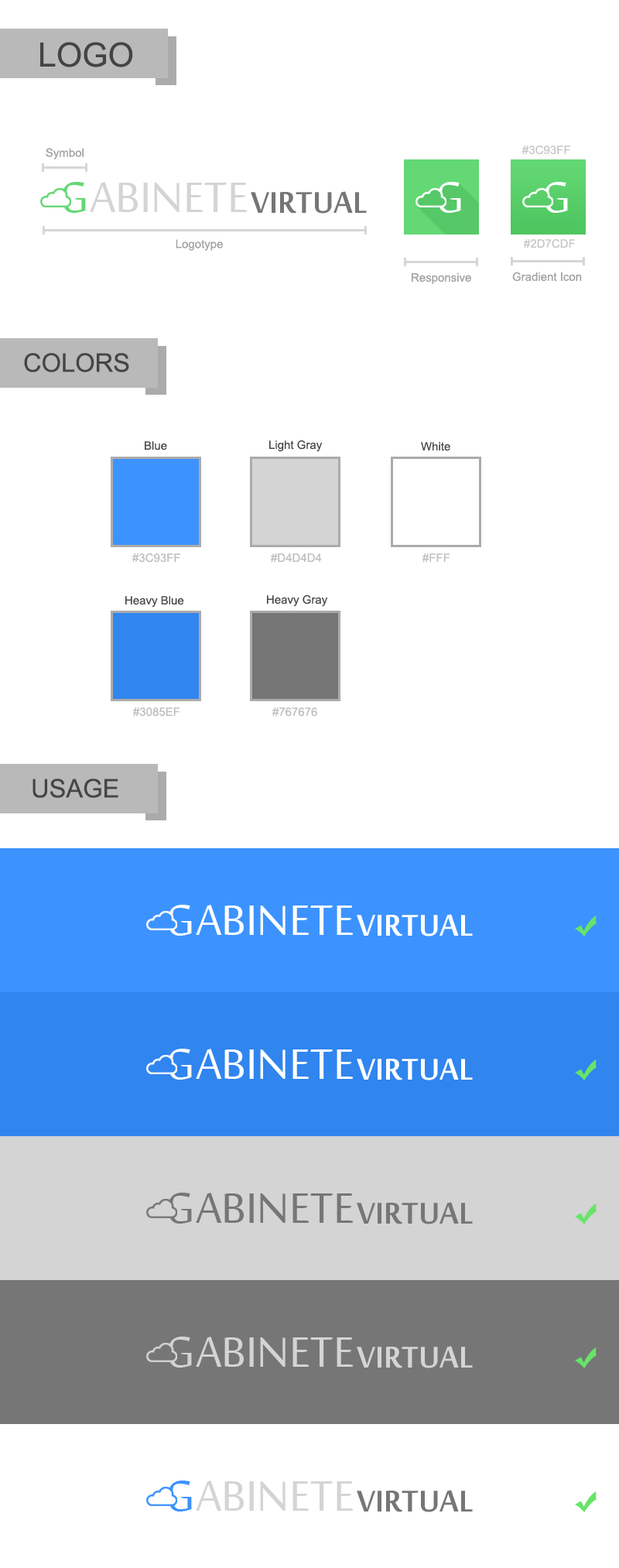
<style>
.page{position:relative;width:619px;height:1568px;background:#ffffff}
.page>*{position:absolute;margin:0}
.t1{font:33.4px "ArialMT";color:#454545}
.t2{font:11.6px "ArialMT";color:#a1a1a1}
.t3{font:11.6px "ArialMT";color:#c8c6c6}
.t4{font:46px "MoolBoran";color:#767676}
.t5{font:25.5px "ArialMT";color:#454545}
.t6{font:11.6px "ArialMT";color:#454545}
.t7{font:11.6px "ArialMT";color:#bfbdbd}
</style>
<div class="page">
<p class="t1" style="left:40px;top:42px;width:93px;height:25px">LOGO</p>
<p class="t2" style="left:46px;top:148px;width:38px;height:11px">Symbol</p>
<p class="t3" style="left:522px;top:146px;width:48px;height:9px">#3C93FF</p>
<p class="t4" style="left:251px;top:191px;width:116px;height:23px">VIRTUAL</p>
<p class="t2" style="left:176px;top:239px;width:47px;height:12px">Logotype</p>
<p class="t3" style="left:524px;top:239px;width:51px;height:9px">#2D7CDF</p>
<p class="t2" style="left:412px;top:273px;width:59px;height:11px">Responsive</p>
<p class="t2" style="left:512px;top:272px;width:70px;height:9px">Gradient Icon</p>
<p class="t5" style="left:24px;top:353px;width:105px;height:19px">COLORS</p>
<p class="t6" style="left:145px;top:441px;width:22px;height:9px">Blue</p>
<p class="t6" style="left:269px;top:440px;width:54px;height:12px">Light Gray</p>
<p class="t6" style="left:421px;top:442px;width:29px;height:9px">White</p>
<p class="t7" style="left:132px;top:553px;width:48px;height:10px">#3C93FF</p>
<p class="t7" style="left:271px;top:553px;width:51px;height:10px">#D4D4D4</p>
<p class="t7" style="left:423px;top:553px;width:27px;height:10px">#FFF</p>
<p class="t6" style="left:125px;top:596px;width:59px;height:12px">Heavy Blue</p>
<p class="t6" style="left:267px;top:595px;width:61px;height:12px">Heavy Gray</p>
<p class="t7" style="left:133px;top:707px;width:47px;height:10px">#3085EF</p>
<p class="t7" style="left:272px;top:707px;width:45px;height:10px">#767676</p>
<p class="t5" style="left:33px;top:779px;width:85px;height:19px">USAGE</p>
</div>
